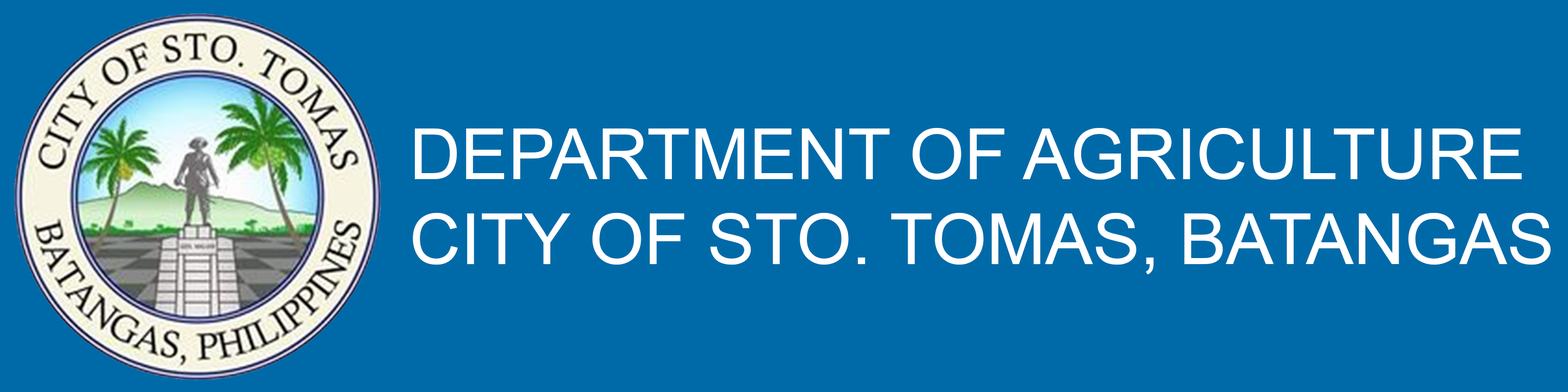
<style>
.page{position:relative;width:1568px;height:392px;background:#006aa9}
.page>*{position:absolute;margin:0}
.t1{font:70.8px "ArialMT";color:#ffffff}
</style>
<div class="page">
<p class="t1" style="left:413px;top:128px;width:1138px;height:146px">DEPARTMENT OF AGRICULTURE<br>CITY OF STO. TOMAS, BATANGAS</p>
</div>
